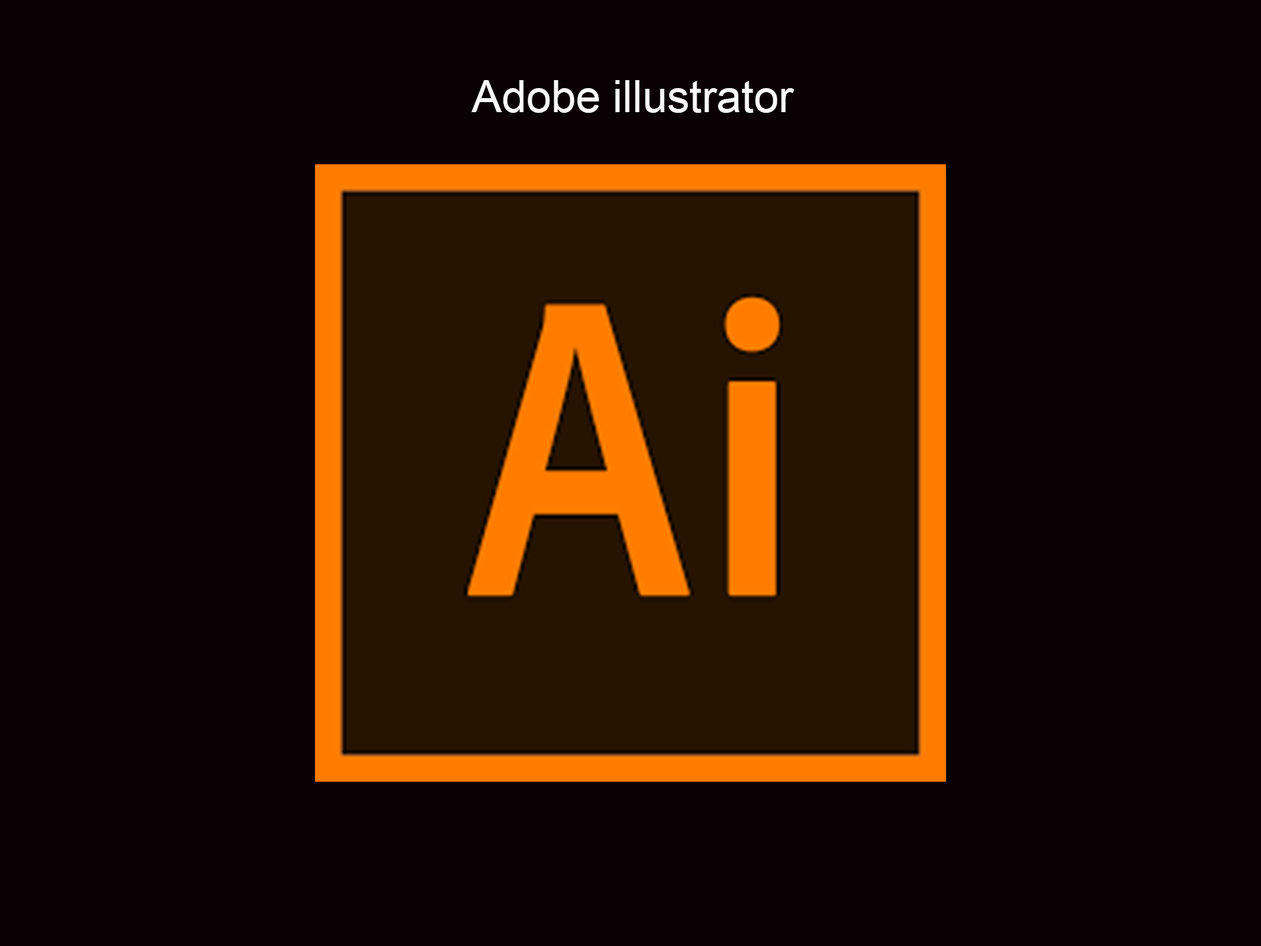
<style>
.page{position:relative;width:1261px;height:946px;background:#080003}
.page>*{position:absolute;margin:0}
.t1{font:44.5px "ArialMT";color:#fcf9fb}
</style>
<div class="page">
<p class="t1" style="left:471px;top:80px;width:324px;height:33px">Adobe illustrator</p>
</div>
